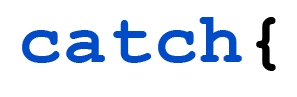
<style>
.page{position:relative;width:297px;height:97px;background:#ffffff}
.page>*{position:absolute;margin:0}
.t1{font:73px "CourierNewPS-BoldMT";letter-spacing:0.02em;color:#004bc8}
.t2{font:73px "CourierNewPS-BoldMT";letter-spacing:0.02em;color:#000000}
</style>
<div class="page">
<p class="t1" style="left:22px;top:17px;width:254px;height:54px">catch<span class="t2">{</span></p>
</div>
